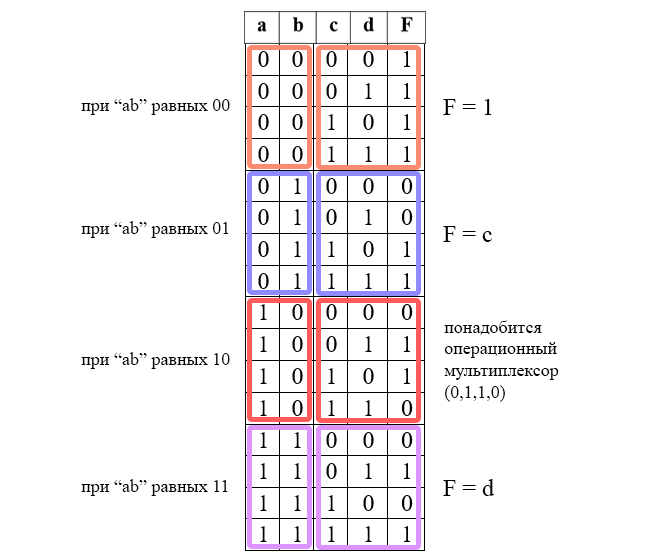
<style>
.page{position:relative;width:660px;height:560px;background:#ffffff}
.page>*{position:absolute;margin:0}
.t1{font:18px "TimesNewRomanPSMT";color:#000000}
.t2{font:24px "TimesNewRomanPSMT";color:#000000}
</style>
<div class="page">
<p class="t1" style="left:81px;top:98px;width:149px;height:17px">при “ab” равных 00</p>
<p class="t2" style="left:443px;top:99px;width:49px;height:16px">F = 1</p>
<p class="t1" style="left:81px;top:221px;width:148px;height:17px">при “ab” равных 01</p>
<p class="t2" style="left:443px;top:226px;width:49px;height:16px">F = c</p>
<p class="t1" style="left:444px;top:320px;width:115px;height:82px">понадобится<br>операционный<br>мультиплексор<br>(0,1,1,0)</p>
<p class="t1" style="left:81px;top:352px;width:149px;height:17px">при “ab” равных 10</p>
<p class="t1" style="left:81px;top:479px;width:147px;height:17px">при “ab” равных 11</p>
<p class="t2" style="left:443px;top:479px;width:51px;height:17px">F = d</p>
</div>
